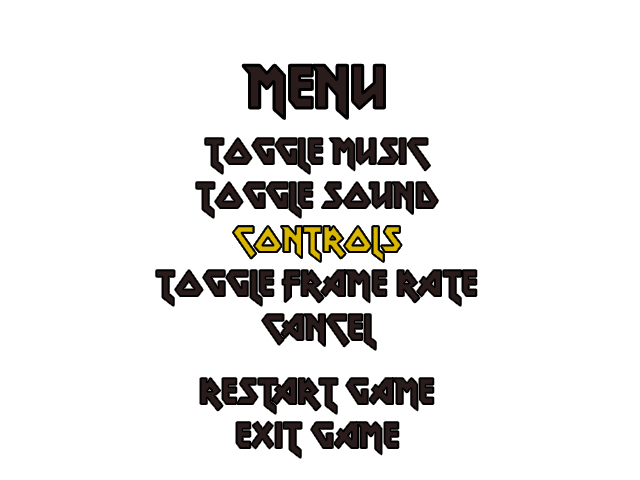
<style>
.page{position:relative;width:640px;height:480px;background:#ffffff}
.page>*{position:absolute;margin:0}
.t1{font:60px "MetalLord-Regular";color:#2b1c1c}
.t2{font:36px "MetalLord-Regular";color:#2b1c1c}
.t3{font:36px "MetalLord-Regular"}
</style>
<div class="page">
<p class="t1" style="left:243px;top:65px;width:142px;height:54px">Menu</p>
<p class="t2" style="left:205px;top:138px;width:225px;height:36px">Toggle Music</p>
<p class="t2" style="left:196px;top:182px;width:242px;height:36px">Toggle SOund</p>
<p class="t3" style="left:233px;top:226px;width:169px;height:36px">Controls</p>
<p class="t3" style="left:233px;top:226px;width:169px;height:36px">Controls</p>
<p class="t2" style="left:156px;top:270px;width:321px;height:36px">Toggle Frame Rate</p>
<p class="t2" style="left:262px;top:314px;width:114px;height:36px">Cancel</p>
<p class="t2" style="left:200px;top:378px;width:234px;height:36px">Restart Game</p>
<p class="t2" style="left:236px;top:421px;width:163px;height:37px">Exit Game</p>
</div>
